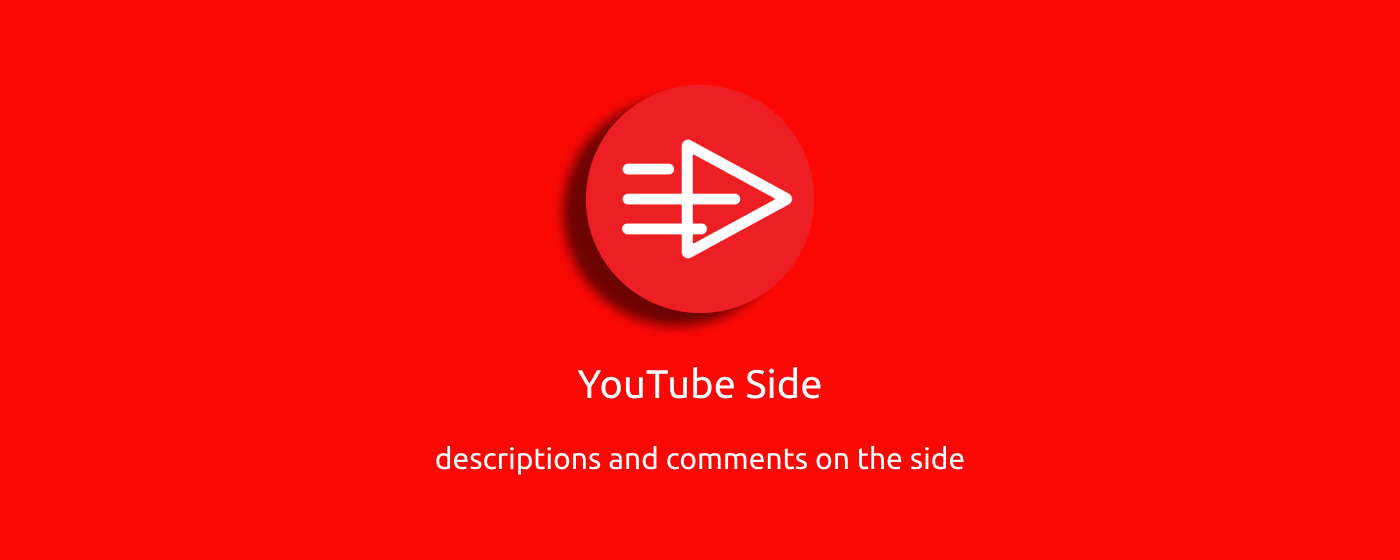
<style>
.page{position:relative;width:1400px;height:560px;background:#fb0805}
.page>*{position:absolute;margin:0}
.t1{font:40px "Ubuntu-Regular";color:#ffffff}
.t2{font:30px "Ubuntu-Regular";color:#ffffff}
</style>
<div class="page">
<p class="t1" style="left:577px;top:366px;width:244px;height:33px">YouTube Side</p>
<p class="t2" style="left:436px;top:445px;width:528px;height:30px">descriptions and comments on the side</p>
</div>
